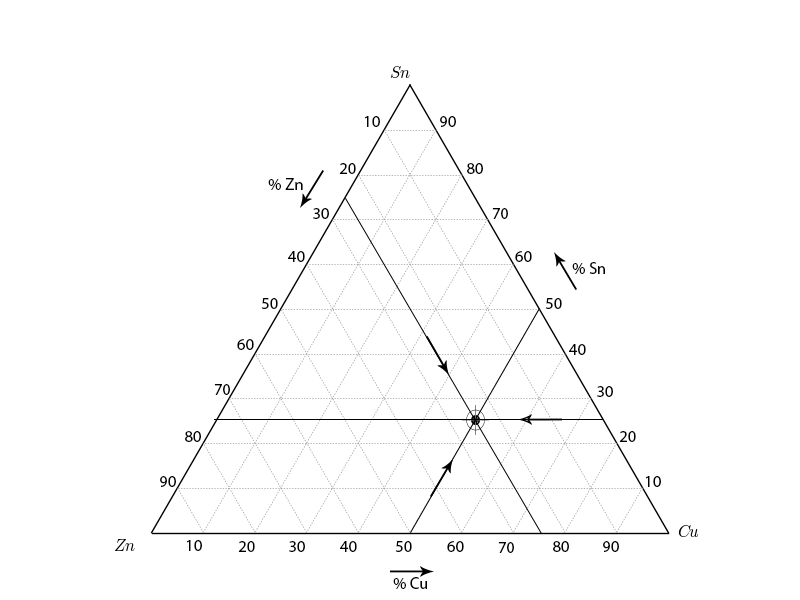
<style>
.page{position:relative;width:800px;height:600px;background:#ffffff}
.page>*{position:absolute;margin:0}
.t1{font:12px "MyriadPro-Regular";color:#000000}
</style>
<div class="page">
<p class="t1" style="left:364px;top:116px;width:16px;height:11px">10</p>
<p class="t1" style="left:440px;top:116px;width:16px;height:11px">90</p>
<p class="t1" style="left:339px;top:163px;width:17px;height:11px">20</p>
<p class="t1" style="left:467px;top:163px;width:16px;height:11px">80</p>
<p class="t1" style="left:268px;top:178px;width:35px;height:12px">% Zn</p>
<p class="t1" style="left:313px;top:208px;width:16px;height:11px">30</p>
<p class="t1" style="left:492px;top:208px;width:16px;height:11px">70</p>
<p class="t1" style="left:288px;top:251px;width:17px;height:11px">40</p>
<p class="t1" style="left:515px;top:251px;width:17px;height:11px">60</p>
<p class="t1" style="left:572px;top:262px;width:33px;height:12px">% Sn</p>
<p class="t1" style="left:261px;top:298px;width:17px;height:11px">50</p>
<p class="t1" style="left:545px;top:298px;width:17px;height:11px">50</p>
<p class="t1" style="left:237px;top:339px;width:17px;height:11px">60</p>
<p class="t1" style="left:569px;top:344px;width:17px;height:11px">40</p>
<p class="t1" style="left:214px;top:384px;width:16px;height:11px">70</p>
<p class="t1" style="left:597px;top:386px;width:16px;height:11px">30</p>
<p class="t1" style="left:185px;top:431px;width:16px;height:11px">80</p>
<p class="t1" style="left:619px;top:431px;width:17px;height:11px">20</p>
<p class="t1" style="left:160px;top:476px;width:16px;height:11px">90</p>
<p class="t1" style="left:645px;top:476px;width:16px;height:11px">10</p>
<p class="t1" style="left:186px;top:540px;width:16px;height:11px">10</p>
<p class="t1" style="left:238px;top:541px;width:17px;height:11px">20</p>
<p class="t1" style="left:289px;top:541px;width:16px;height:11px">30</p>
<p class="t1" style="left:340px;top:541px;width:17px;height:11px">40</p>
<p class="t1" style="left:395px;top:541px;width:17px;height:11px">50</p>
<p class="t1" style="left:447px;top:541px;width:17px;height:11px">60</p>
<p class="t1" style="left:498px;top:542px;width:16px;height:11px">70</p>
<p class="t1" style="left:553px;top:541px;width:16px;height:11px">80</p>
<p class="t1" style="left:603px;top:541px;width:16px;height:11px">90</p>
<p class="t1" style="left:393px;top:577px;width:34px;height:12px">% Cu</p>
</div>
